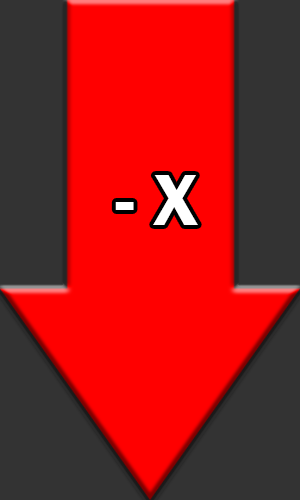
<style>
.page{position:relative;width:300px;height:500px;background:#ff0000}
.page>*{position:absolute;margin:0}
.t1{font:75px "FranklinGothic-Demi";color:#ffffff}
</style>
<div class="page">
<p class="t1" style="left:115px;top:175px;width:83px;height:50px">- X</p>
</div>
